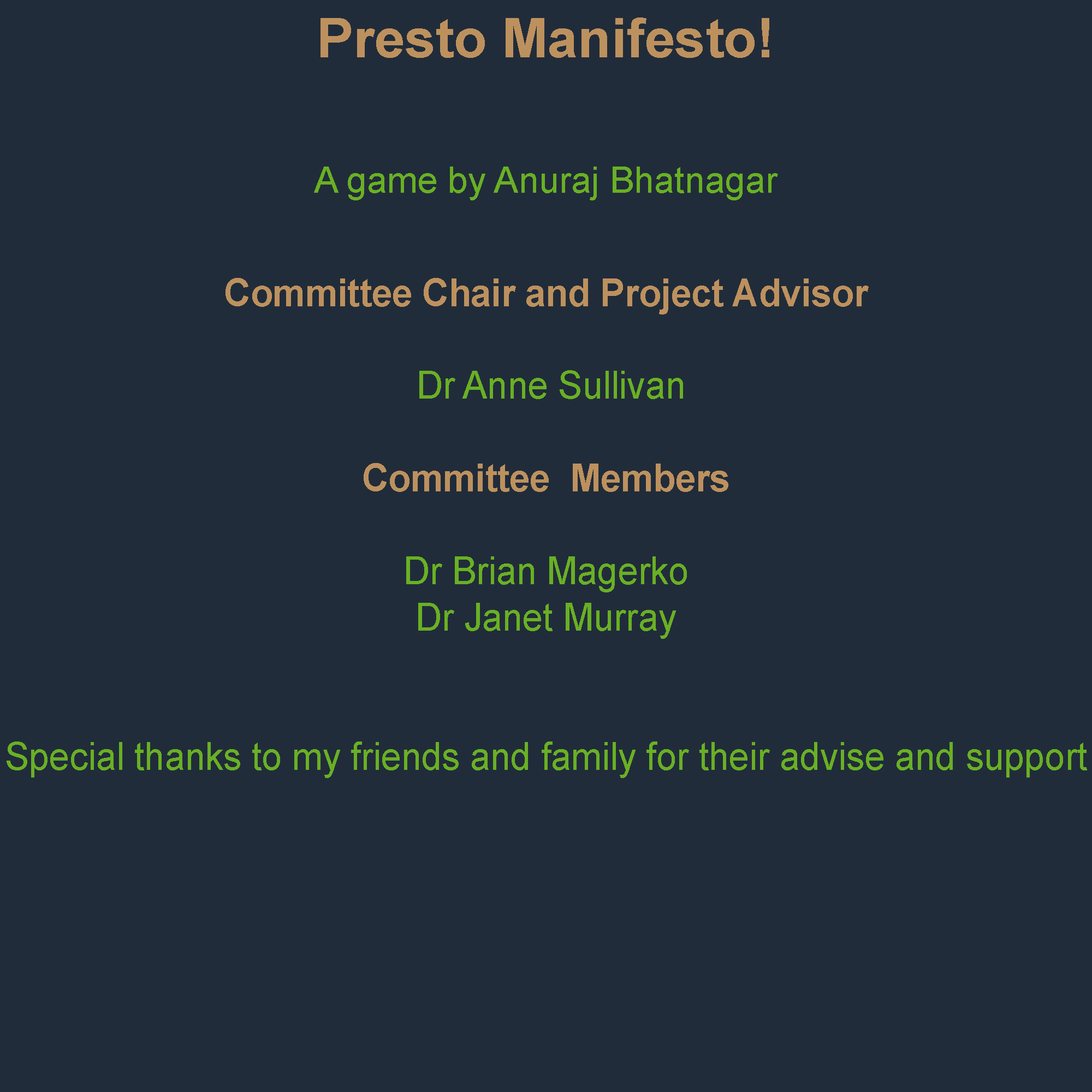
<style>
.page{position:relative;width:1092px;height:1092px;background:#212c3a}
.page>*{position:absolute;margin:0}
.t1{font:54.6px "Arial-BoldMT";color:#bd915e}
.t2{font:36.4px "ArialMT";color:#69b024}
.t3{font:38.7px "ArialMT";color:#69b024;scale:0.94 1}
.t4{font:38.7px "Arial-BoldMT";color:#bd915e;scale:0.94 1}
</style>
<div class="page">
<p class="t1" style="left:320px;top:17px;width:449px;height:41px">Presto Manifesto!</p>
<p class="t2" style="left:314px;top:167px;width:464px;height:33px">A game by Anuraj Bhatnagar</p>
<p class="t3" style="left:7px;top:278px;width:1080px;height:500px;text-align:center"><span class="t4">Committee Chair and Project Advisor<br><br> </span>Dr Anne Sullivan<br><span class="t4"><br>Committee  Members<br><br></span>Dr Brian Magerko<br>Dr Janet Murray<br><br><br>Special thanks to my friends and family for their advise and support</p>
</div>
